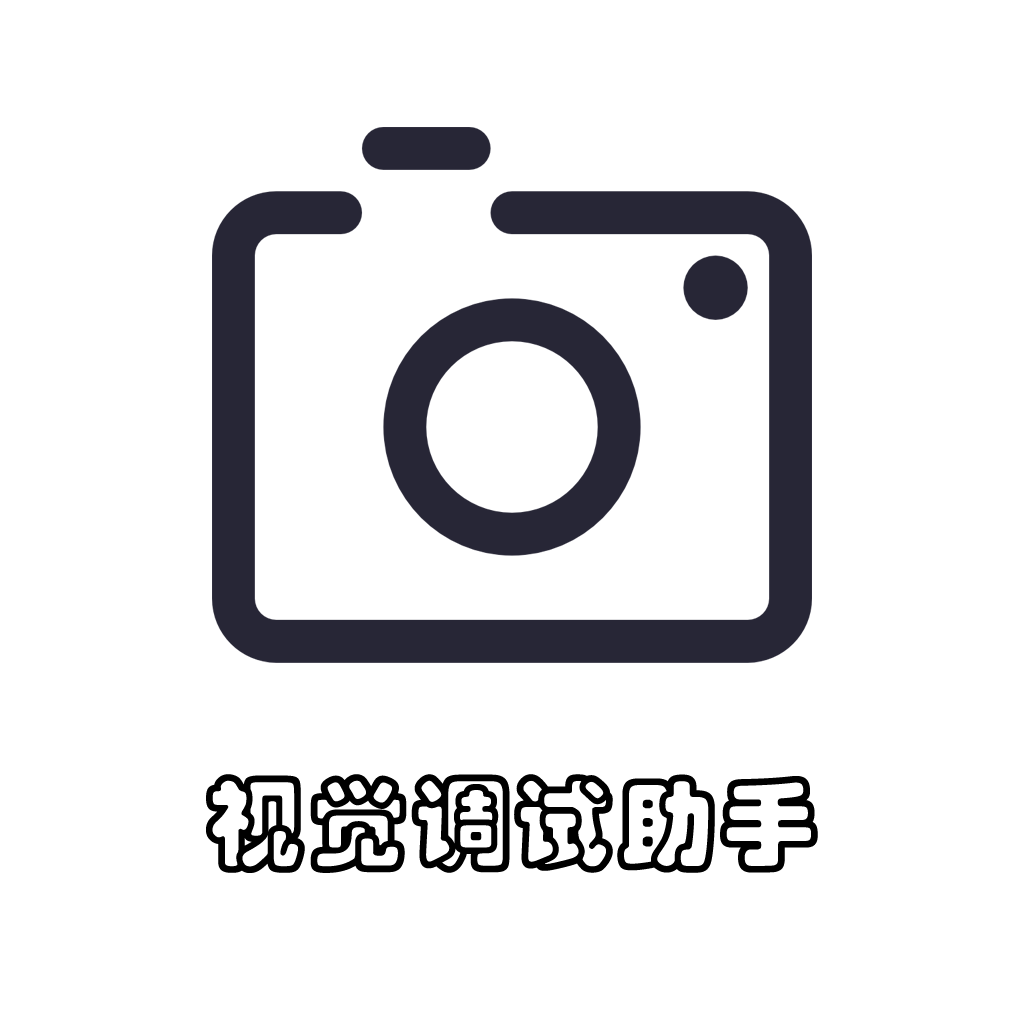
<style>
.page{position:relative;width:1024px;height:1024px;background:#ffffff}
.page>*{position:absolute;margin:0}
.t1{font:100px "STCaiyun";color:#000000;font-weight:bold}
</style>
<div class="page">
<p class="t1" style="left:206px;top:774px;width:612px;height:99px">视觉调试助手</p>
</div>
